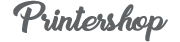
<style>
.page{position:relative;width:180px;height:42px;background:#ffffff}
.page>*{position:absolute;margin:0}
.t1{font:40.9px "SweetSensationsPersonalUse";color:#606366;scale:1.13 1}
</style>
<div class="page">
<p class="t1" style="left:13px;top:0px;width:155px;height:42px">Printershop</p>
</div>
